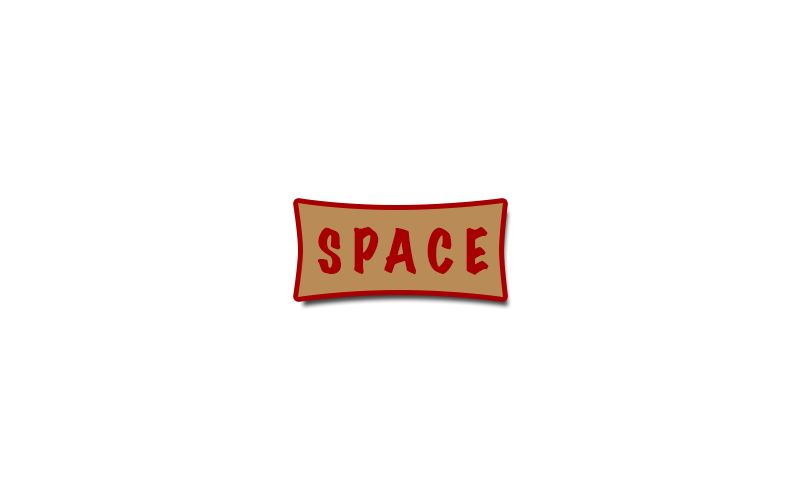
<style>
.page{position:relative;width:800px;height:500px;background:#ffffff}
.page>*{position:absolute;margin:0}
.t1{font:54.2px "MarkerFelt-Wide";letter-spacing:0.2em;color:#a60000;scale:0.91 1}
</style>
<div class="page">
<p class="t1" style="left:317px;top:227px;width:172px;height:48px">SPACE</p>
</div>
